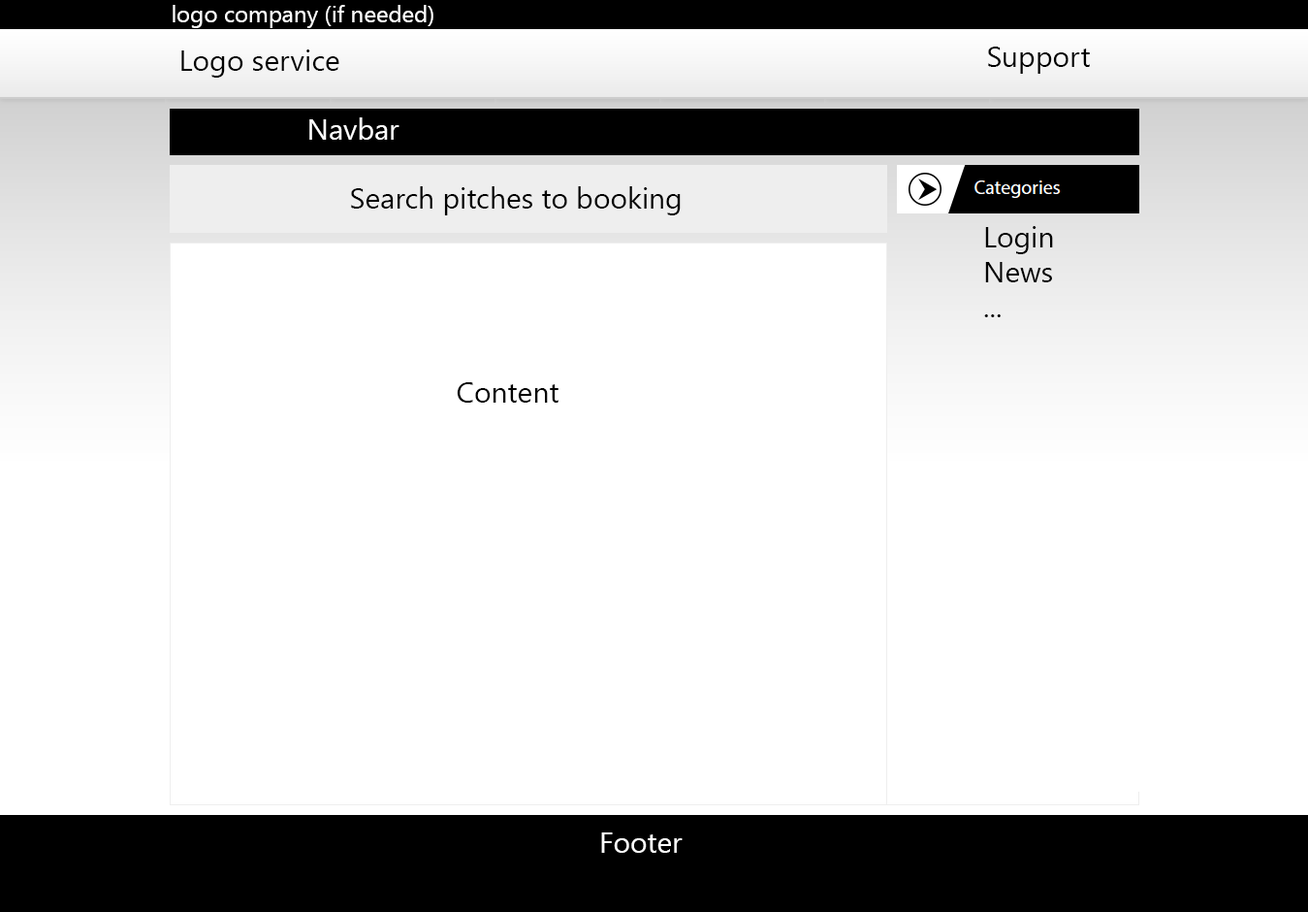
<style>
.page{position:relative;width:1308px;height:912px;background:#ffffff}
.page>*{position:absolute;margin:0}
.t1{font:23.3px "SegoeUI";color:#ffffff}
.t2{font:29.1px "SegoeUI";color:#000000}
.t3{font:29.1px "SegoeUI";color:#ffffff}
</style>
<div class="page">
<p class="t1" style="left:173px;top:5px;width:260px;height:23px">logo company (if needed)</p>
<p class="t2" style="left:181px;top:49px;width:158px;height:29px">Logo service</p>
<p class="t2" style="left:988px;top:47px;width:102px;height:27px">Support</p>
<p class="t3" style="left:309px;top:117px;width:91px;height:23px">Navbar</p>
<p class="t2" style="left:351px;top:186px;width:330px;height:29px">Search pitches to booking</p>
<p class="t2" style="left:984px;top:226px;width:69px;height:91px">Login<br>News<br>...</p>
<p class="t2" style="left:457px;top:382px;width:102px;height:20px">Content</p>
<p class="t3" style="left:601px;top:832px;width:82px;height:20px">Footer</p>
</div>
